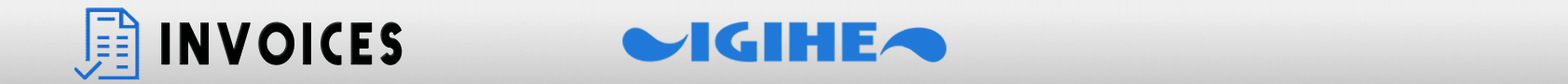
<style>
.page{position:relative;width:1568px;height:84px}
.page>*{position:absolute;margin:0}
.t1{font:52.5px "Globus";letter-spacing:0.18em;color:#000101;font-weight:bold;scale:0.83 1}
</style>
<div class="page">
<p class="t1" style="left:161px;top:21px;width:241px;height:44px">INVOICES</p>
</div>
